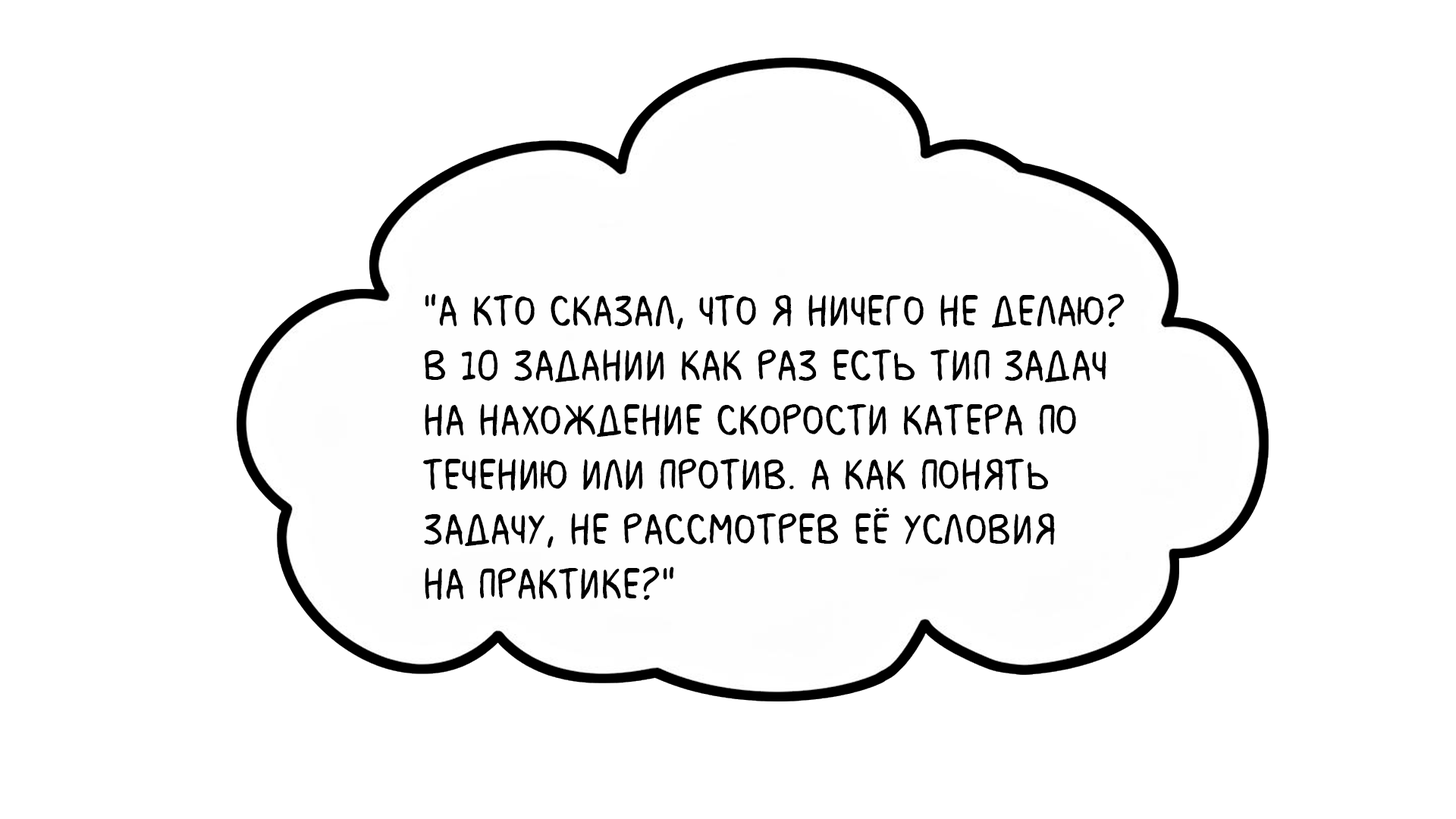
<style>
.page{position:relative;width:1456px;height:819px;background:#ffffff}
.page>*{position:absolute;margin:0}
.t1{font:45.5px "MilkMustacheBB";color:#000000}
</style>
<div class="page">
<p class="t1" style="left:423px;top:293px;width:702px;height:308px">"А кто сказал, что я ничего не делаю? <br>В 10 задании как раз есть тип задач <br>на нахождение скорости катера по <br>течению или против. А как понять <br>задачу, не рассмотрев её условия <br>на практике?"</p>
</div>
